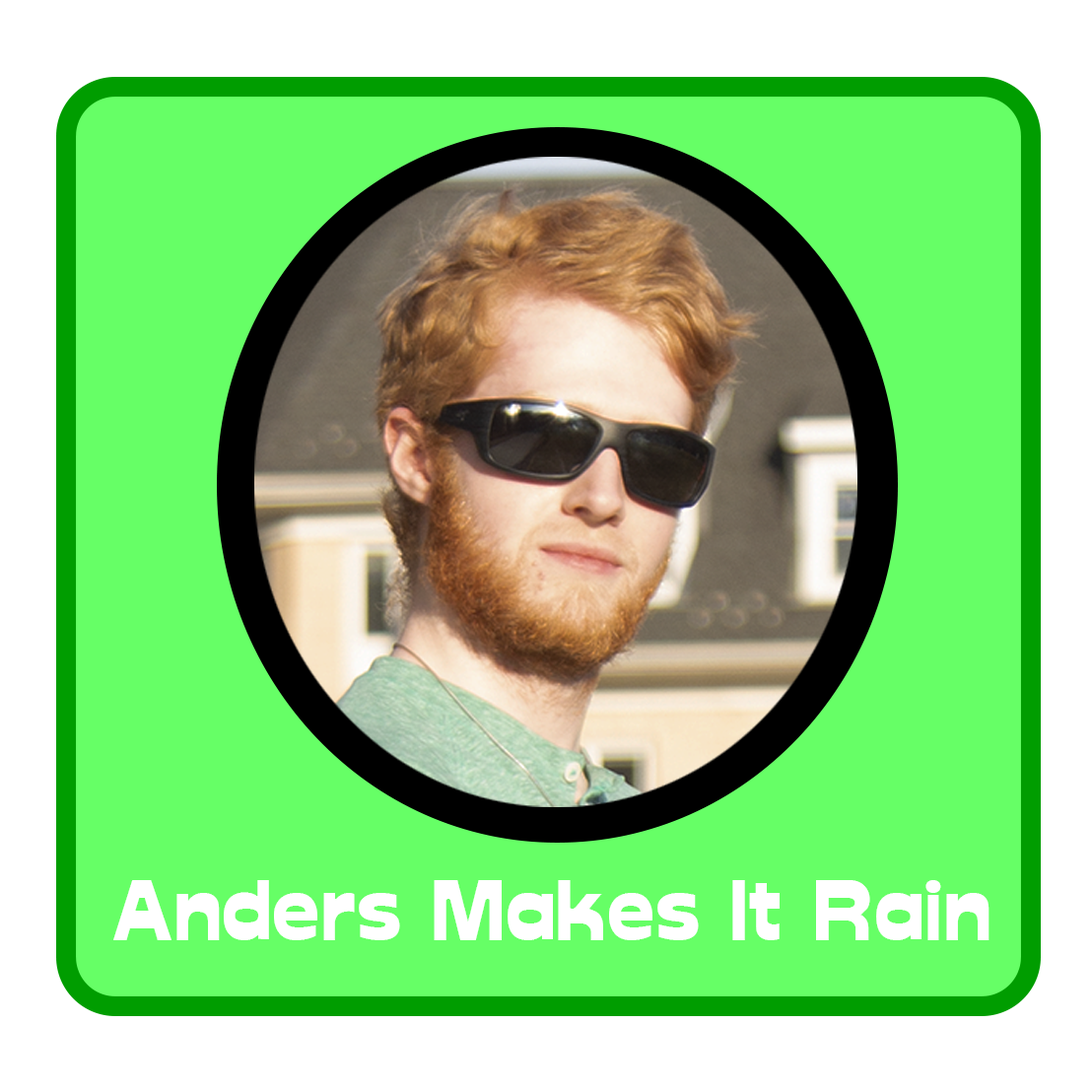
<style>
.page{position:relative;width:1092px;height:1092px;background:#66ff66}
.page>*{position:absolute;margin:0}
.t1{font:82.1px "Glockenspiel";color:#ffffff}
</style>
<div class="page">
<p class="t1" style="left:113px;top:880px;width:876px;height:60px">Anders Makes It Rain</p>
</div>
